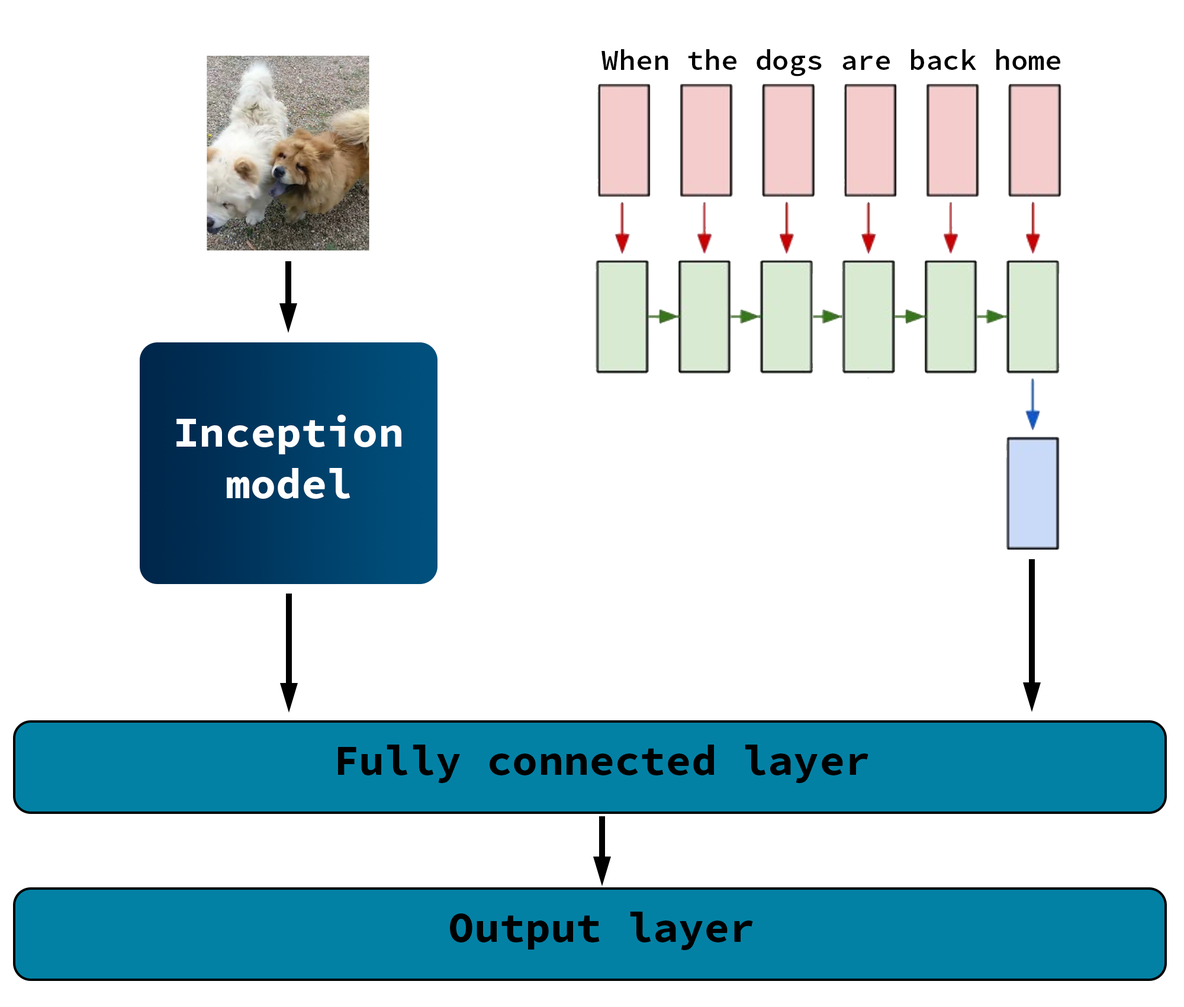
<style>
.page{position:relative;width:1184px;height:1007px;background:#ffffff}
.page>*{position:absolute;margin:0}
.t1{font:28.4px "SourceCodePro-Semibold";color:#000000}
.t2{font:42.6px "SourceCodePro-Bold";color:#ffffff}
.t3{font:42.6px "SourceCodePro-Bold";color:#000000}
</style>
<div class="page">
<p class="t1" style="left:602px;top:49px;width:459px;height:27px">When the dogs are back home</p>
<p class="t2" style="left:176px;top:415px;width:226px;height:84px;text-align:center">Inception<br>model</p>
<p class="t3" style="left:338px;top:744px;width:531px;height:39px">Fully connected layer</p>
<p class="t3" style="left:450px;top:911px;width:303px;height:39px">Output layer</p>
</div>
